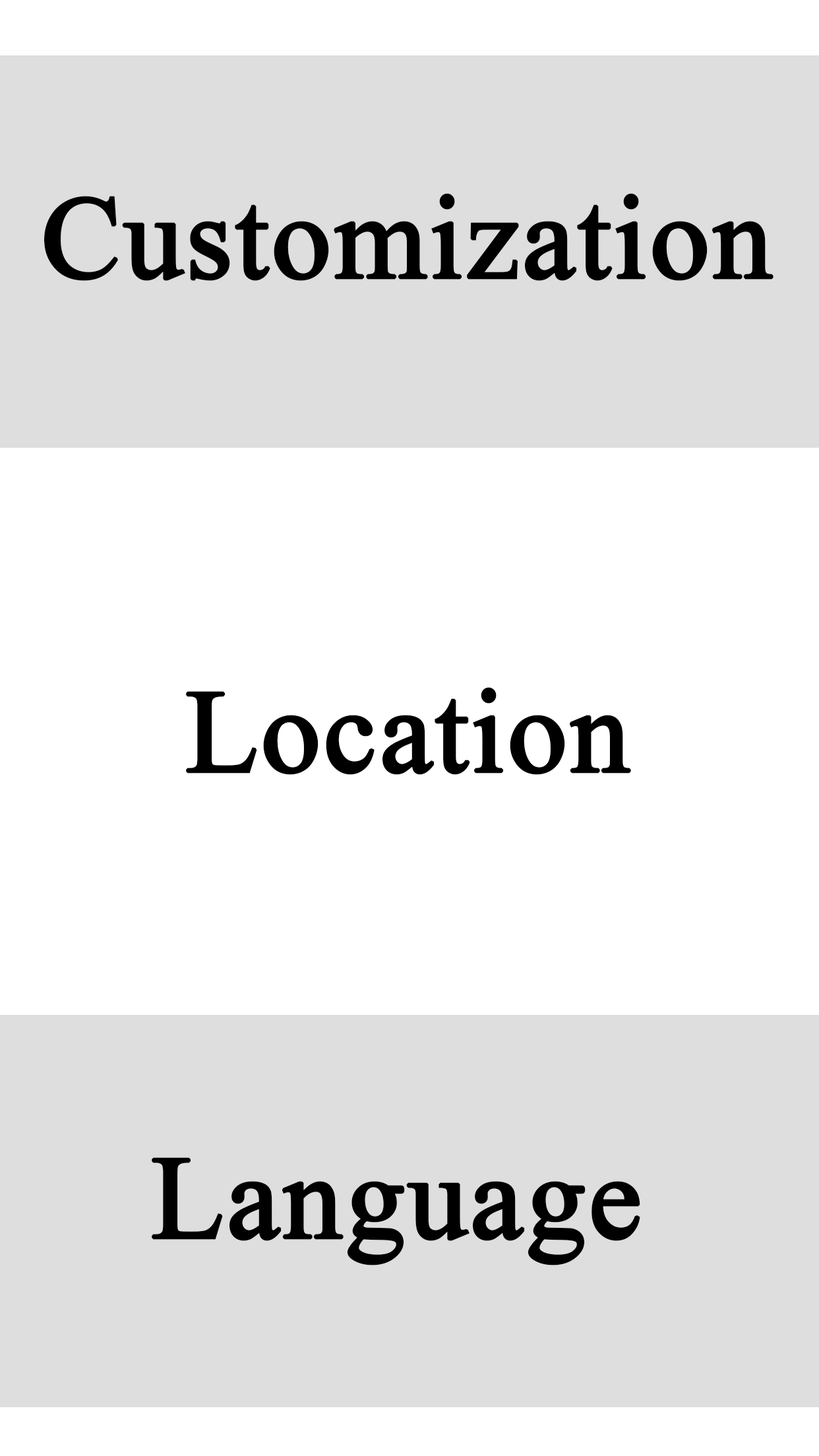
<style>
.page{position:relative;width:819px;height:1456px;background:#dedede}
.page>*{position:absolute;margin:0}
.t1{font:118.7px "TimesNewRomanPSMT";color:#000000;font-weight:bold}
</style>
<div class="page">
<p class="t1" style="left:44px;top:193px;width:729px;height:88px">Customization</p>
<p class="t1" style="left:186px;top:687px;width:445px;height:88px">Location</p>
<p class="t1" style="left:152px;top:1157px;width:488px;height:108px">Language</p>
</div>
